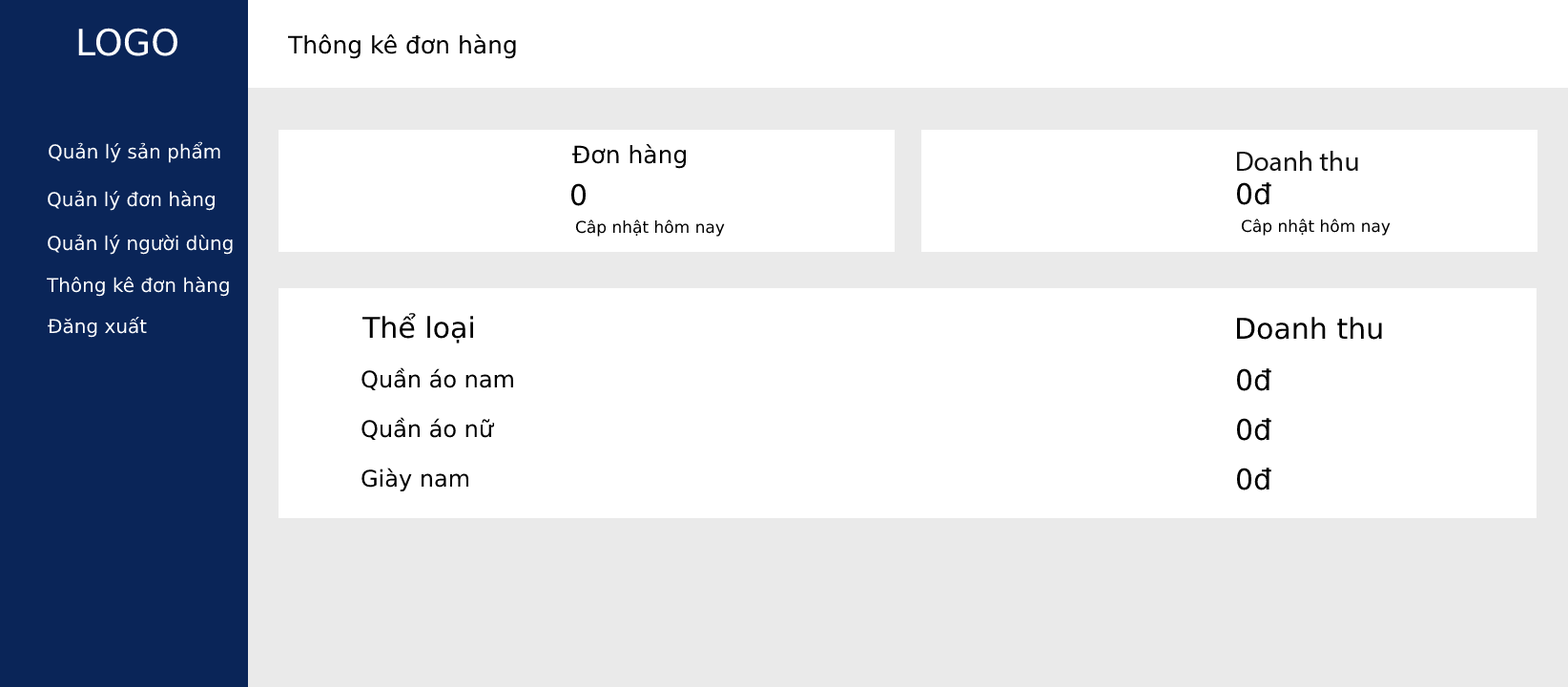
<style>
.page{position:relative;width:1568px;height:687px;background:#ffffff}
.page>*{position:absolute;margin:0}
.t1{font:36.2px "DejaVuSans";color:#ffffff}
.t2{font:23.8px "DejaVuSans";color:#000000}
.t3{font:19.1px "DejaVuSans";color:#ffffff}
.t4{font:27.9px "MyriadPro-Regular";color:#121212}
.t5{font:28.6px "DejaVuSans";color:#000000}
.t6{font:16.2px "DejaVuSans";color:#000000}
.t7{font:22.9px "DejaVuSans";color:#000000}
</style>
<div class="page">
<p class="t1" style="left:78px;top:28px;width:99px;height:28px">LOGO</p>
<p class="t2" style="left:287px;top:34px;width:229px;height:25px">Thông kê đơn hàng</p>
<p class="t3" style="left:49px;top:141px;width:171px;height:22px">Quản lý sản phẩm</p>
<p class="t2" style="left:572px;top:144px;width:115px;height:25px">Đơn hàng</p>
<p class="t4" style="left:1237px;top:151px;width:121px;height:20px">Doanh thu</p>
<p class="t5" style="left:570px;top:183px;width:17px;height:23px">0</p>
<p class="t5" style="left:1236px;top:182px;width:35px;height:23px">0đ</p>
<p class="t3" style="left:48px;top:190px;width:167px;height:21px">Quản lý đơn hàng</p>
<p class="t6" style="left:575px;top:219px;width:150px;height:18px">Câp nhật hôm nay</p>
<p class="t6" style="left:1242px;top:218px;width:149px;height:18px">Câp nhật hôm nay</p>
<p class="t3" style="left:48px;top:234px;width:185px;height:21px">Quản lý người dùng</p>
<p class="t3" style="left:46px;top:277px;width:183px;height:20px">Thông kê đơn hàng</p>
<p class="t3" style="left:48px;top:317px;width:99px;height:21px">Đăng xuất</p>
<p class="t5" style="left:361px;top:313px;width:112px;height:30px">Thể loại</p>
<p class="t5" style="left:1236px;top:317px;width:146px;height:23px">Doanh thu</p>
<p class="t7" style="left:361px;top:367px;width:152px;height:24px">Quần áo nam</p>
<p class="t5" style="left:1236px;top:368px;width:35px;height:23px">0đ</p>
<p class="t7" style="left:361px;top:417px;width:134px;height:24px">Quần áo nữ</p>
<p class="t5" style="left:1236px;top:418px;width:35px;height:23px">0đ</p>
<p class="t7" style="left:361px;top:467px;width:108px;height:24px">Giày nam</p>
<p class="t5" style="left:1236px;top:467px;width:35px;height:23px">0đ</p>
</div>
